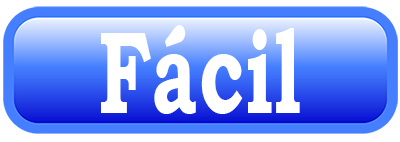
<style>
.page{position:relative;width:400px;height:142px;background:#ffffff}
.page>*{position:absolute;margin:0}
.t1{font:118.3px "BookmanOldStyle-Bold";letter-spacing:0.01em;color:#ffffff;scale:0.66 1}
</style>
<div class="page">
<p class="t1" style="left:101px;top:25px;width:199px;height:89px">Fácil</p>
</div>
